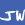
<style>
.page{position:relative;width:25px;height:25px;background:#4261af}
.page>*{position:absolute;margin:0}
.t1{font:21px "John_Walton_Print";letter-spacing:-0.01em;color:#ffffff}
</style>
<div class="page">
<p class="t1" style="left:0px;top:9px;width:25px;height:12px">JW</p>
<p class="t1" style="left:0px;top:11px;width:16px;height:10px">J</p>
</div>
